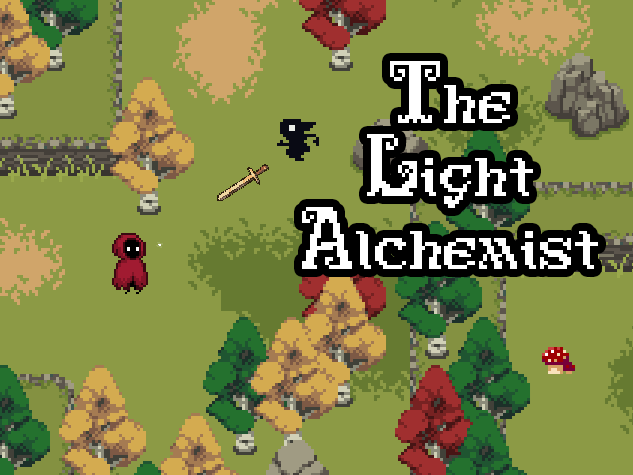
<style>
.page{position:relative;width:633px;height:475px;background:#8c9a45}
.page>*{position:absolute;margin:0}
.t1{font:50px/73px "Antiquity-print";color:#ffffff}
.t2{font:50px "Antiquity-print";color:#ffffff}
</style>
<div class="page">
<p class="t1" style="left:302px;top:61px;width:296px;height:208px;text-align:center"><span class="t2"><br></span>The<br>Light <br>Alchemist</p>
</div>
